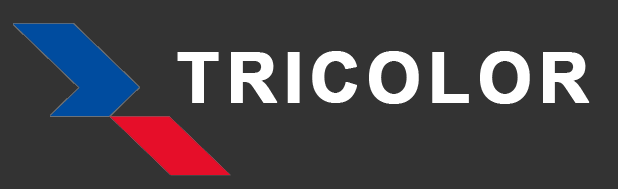
<style>
.page{position:relative;width:618px;height:189px;background:#333333}
.page>*{position:absolute;margin:0}
.t1{font:69.3px "Arial-BoldMT";letter-spacing:0.075em;color:#ffffff;font-weight:bold}
</style>
<div class="page">
<p class="t1" style="left:177px;top:51px;width:413px;height:53px">TRICOLOR</p>
</div>
